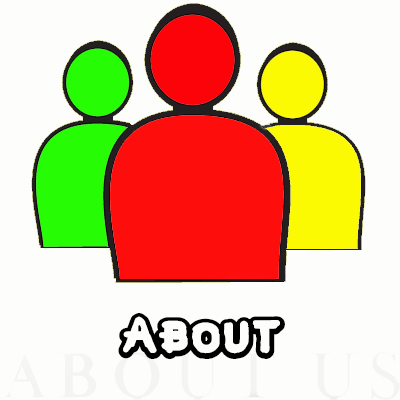
<style>
.page{position:relative;width:400px;height:400px;background:#fdfdfb}
.page>*{position:absolute;margin:0}
.t1{font:66.6px "The-Kids-Mraker-Regular";color:#000000}
</style>
<div class="page">
<p class="t1" style="left:118px;top:313px;width:167px;height:46px">About</p>
</div>
